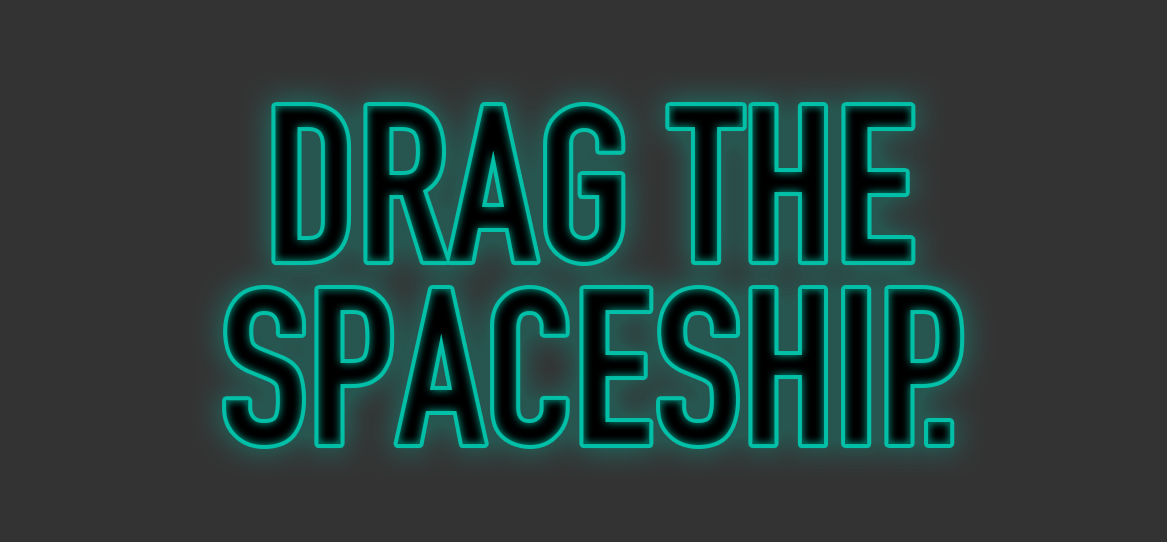
<style>
.page{position:relative;width:1167px;height:542px;background:#333333}
.page>*{position:absolute;margin:0}
.t1{font:217px/183.4px "DINEngschrift";text-transform:uppercase}
</style>
<div class="page">
<p class="t1" style="left:226px;top:106px;width:735px;height:339px;text-align:center">Drag the <br>spaceship.</p>
</div>
